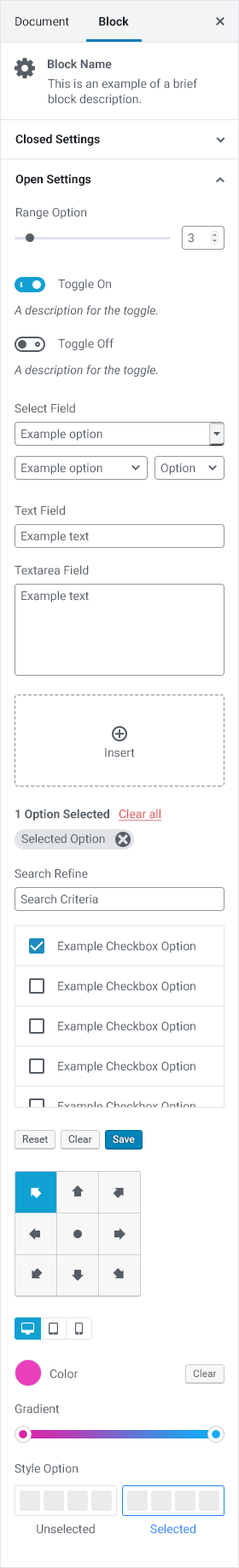
<style>
.page{position:relative;width:239px;height:1568px;background:#ffffff}
.page>*{position:absolute;margin:0}
.t1{font:11.9px "Roboto-Regular";color:#191e23}
.t2{font:11.9px "Roboto-Bold";color:#191e23}
.t3{font:11.9px "Roboto-Bold";color:#555d66}
.t4{font:11.9px/15.3px "Roboto-Regular";color:#555d66}
.t5{font:11.9px "Roboto-Regular";color:#555d66}
.t6{font:11.9px "Roboto-Italic";color:#555d66}
.t7{font:11.9px "Roboto-Regular";color:#d94f4f;text-decoration:underline}
.t8{font:11.9px "Roboto-Regular"}
.t9{font:10.2px "Roboto-Regular";color:#555d66}
.t10{font:10.2px "Roboto-Regular";color:#ffffff}
.t11{font:11.9px "Roboto-Regular";color:#2184f9}
</style>
<div class="page">
<p class="t1" style="left:15px;top:17px;width:54px;height:9px">Document</p>
<p class="t2" style="left:99px;top:16px;width:30px;height:10px">Block</p>
<p class="t3" style="left:48px;top:59px;width:64px;height:10px">Block Name</p>
<p class="t4" style="left:48px;top:78px;width:149px;height:28px">This is an example of a brief block description.</p>
<p class="t2" style="left:15px;top:134px;width:85px;height:12px">Closed Settings</p>
<p class="t2" style="left:15px;top:174px;width:76px;height:12px">Open Settings</p>
<p class="t5" style="left:16px;top:207px;width:70px;height:12px">Range Option</p>
<p class="t5" style="left:187px;top:233px;width:6px;height:10px">3</p>
<p class="t5" style="left:58px;top:279px;width:53px;height:12px">Toggle On</p>
<p class="t6" style="left:14px;top:305px;width:144px;height:12px">A description for the toggle.</p>
<p class="t5" style="left:58px;top:338px;width:55px;height:12px">Toggle Off</p>
<p class="t6" style="left:14px;top:365px;width:144px;height:12px">A description for the toggle.</p>
<p class="t5" style="left:14px;top:403px;width:61px;height:10px">Select Field</p>
<p class="t5" style="left:21px;top:429px;width:81px;height:12px">Example option</p>
<p class="t5" style="left:21px;top:463px;width:81px;height:12px">Example option</p>
<p class="t5" style="left:160px;top:463px;width:35px;height:12px">Option</p>
<p class="t5" style="left:14px;top:505px;width:51px;height:11px">Text Field</p>
<p class="t5" style="left:21px;top:531px;width:68px;height:12px">Example text</p>
<p class="t5" style="left:14px;top:565px;width:75px;height:10px">Textarea Field</p>
<p class="t5" style="left:21px;top:591px;width:68px;height:11px">Example text</p>
<p class="t5" style="left:105px;top:748px;width:30px;height:10px">Insert</p>
<p class="t3" style="left:15px;top:809px;width:94px;height:12px">1 Option Selected</p>
<p class="t7" style="left:118px;top:809px;width:44px;height:12px">Clear all</p>
<p class="t5" style="left:21px;top:833px;width:84px;height:12px">Selected Option</p>
<p class="t5" style="left:14px;top:868px;width:74px;height:11px">Search Refine</p>
<p class="t5" style="left:20px;top:894px;width:78px;height:10px">Search Criteria</p>
<p class="t5" style="left:58px;top:941px;width:137px;height:12px">Example Checkbox Option</p>
<p class="t5" style="left:58px;top:981px;width:137px;height:12px">Example Checkbox Option</p>
<p class="t5" style="left:58px;top:1021px;width:137px;height:12px">Example Checkbox Option</p>
<p class="t5" style="left:58px;top:1061px;width:137px;height:12px">Example Checkbox Option</p>
<p class="t8" style="left:58px;top:1101px;width:137px;height:12px">Example Checkbox Option</p>
<p class="t9" style="left:22px;top:1135px;width:26px;height:8px">Reset</p>
<p class="t9" style="left:68px;top:1135px;width:24px;height:8px">Clear</p>
<p class="t10" style="left:112px;top:1135px;width:23px;height:9px">Save</p>
<p class="t5" style="left:49px;top:1369px;width:29px;height:10px">Color</p>
<p class="t9" style="left:193px;top:1369px;width:23px;height:8px">Clear</p>
<p class="t5" style="left:14px;top:1404px;width:45px;height:10px">Gradient</p>
<p class="t5" style="left:14px;top:1463px;width:64px;height:12px">Style Option</p>
<p class="t5" style="left:37px;top:1524px;width:58px;height:10px">Unselected</p>
<p class="t11" style="left:150px;top:1524px;width:45px;height:10px">Selected</p>
</div>
